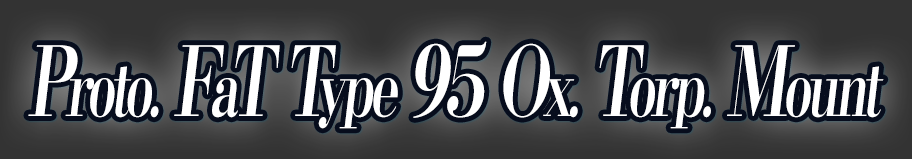
<style>
.page{position:relative;width:912px;height:159px}
.page>*{position:absolute;margin:0}
.t1{font:76.8px "KochoStd-Heavy";letter-spacing:-0.08em;color:#ffffff;font-style:italic;scale:0.68 1}
.t2{font:96px "KochoStd-Heavy";letter-spacing:-0.08em;color:#ffffff;font-style:italic;scale:0.68 1}
</style>
<div class="page">
<p class="t1" style="left:28px;top:41px;width:856px;height:88px"><span class="t2">P</span>roto.<span class="t2"> F</span>a<span class="t2">T T</span>ype <span class="t2">95 O</span>x.<span class="t2"> T</span>orp.<span class="t2"> M</span>ount</p>
</div>
